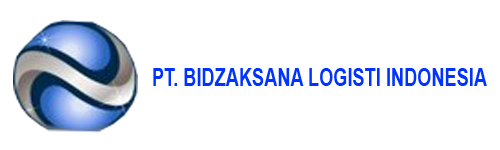
<style>
.page{position:relative;width:500px;height:150px;background:#ffffff}
.page>*{position:absolute;margin:0}
.t1{font:25.1px "Arial-BoldMT";color:#0033ff;scale:0.72 1}
</style>
<div class="page">
<p class="t1" style="left:153px;top:68px;width:334px;height:18px">PT. BIDZAKSANA LOGISTI INDONESIA</p>
</div>
